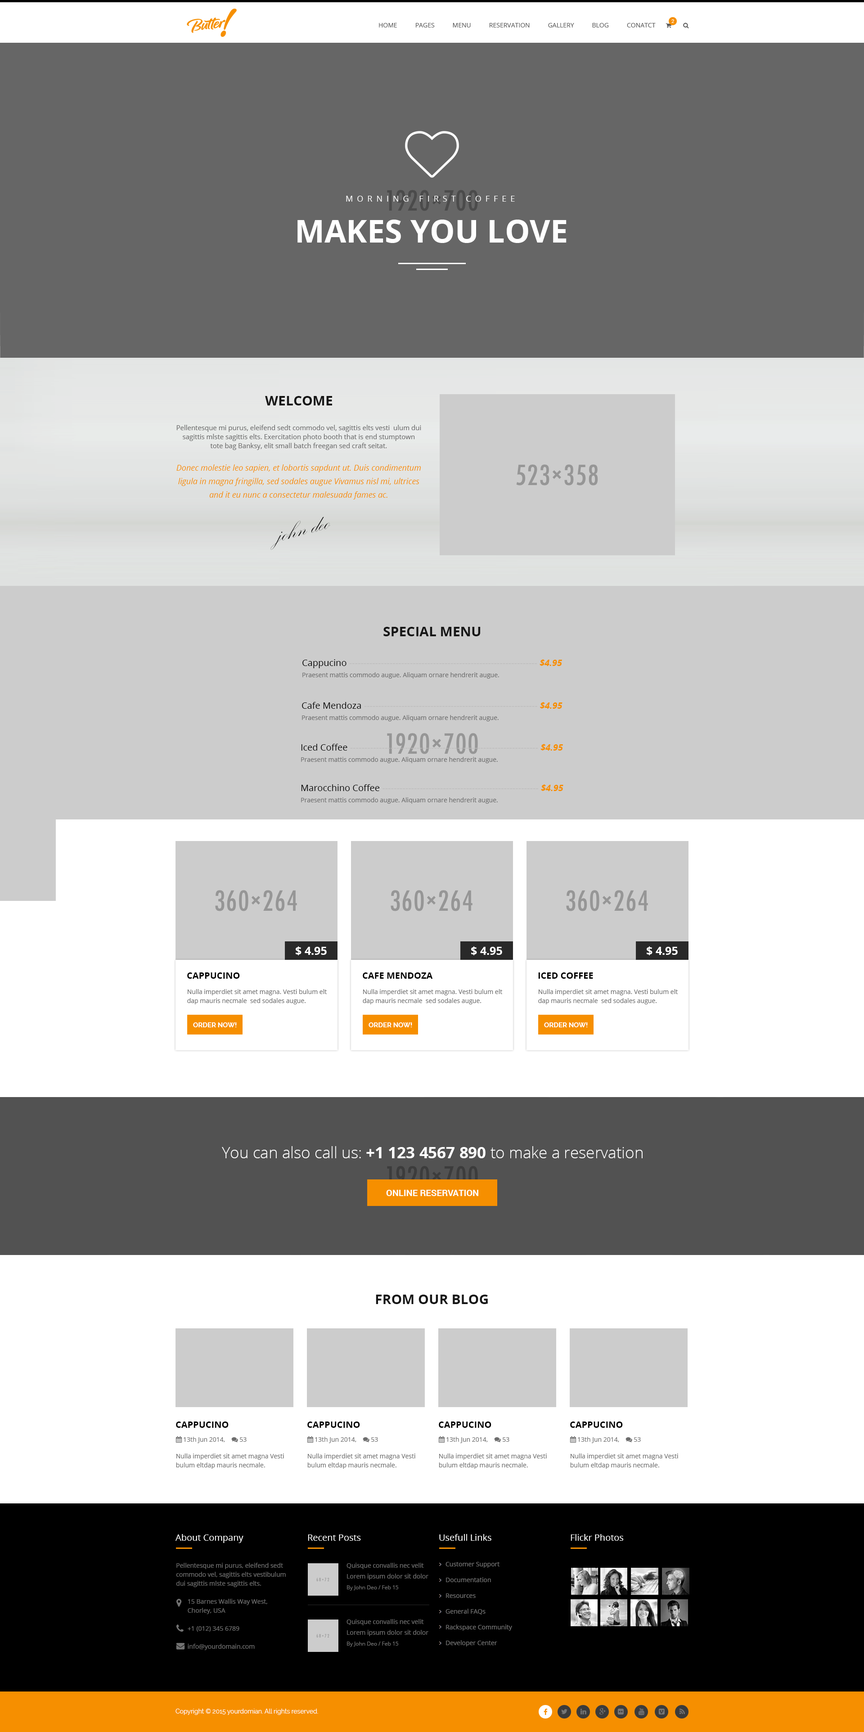
<style>
.page{position:relative;width:864px;height:1732px;background:#ffffff}
.page>*{position:absolute;margin:0}
.t1{font:5px "Lato-Regular";color:#ffffff;text-transform:uppercase}
.t2{font:8.1px "OpenSans";letter-spacing:0.5em;color:#ffffff;text-transform:uppercase}
.t3{font:31.5px "OpenSans-Bold";color:#ffffff;text-transform:uppercase}
.t4{font:13.5px "OpenSans-Bold";color:#161616;text-transform:uppercase}
.t5{font:6.7px/9px "OpenSans";color:#6d6d6d}
.t6{font:8.1px/13.5px "OpenSans-Italic";color:#f68f00}
.t7{font:27px "KunstlerScript";color:#000000}
.t8{font:9px/11.2px "OpenSans";color:#bdbcbc}
.t9{font:9px/11.2px "OpenSans";color:#010101}
.t10{font:9px/11.2px "OpenSans-BoldItalic";color:#f68f00}
.t11{font:6.3px/11.2px "OpenSans";color:#6d6d6d}
.t12{font:11.2px "OpenSans-Bold";color:#ffffff;text-transform:uppercase}
.t13{font:9px "OpenSans-Bold";color:#000000;text-transform:uppercase}
.t14{font:6.3px/9px "OpenSans";color:#6d6d6d}
.t15{font:6.8px "Raleway-Bold";color:#ffffff;text-transform:uppercase}
.t16{font:15.8px "OpenSans-Light";color:#ffffff}
.t17{font:15.8px "OpenSans-Bold";color:#ffffff}
.t18{font:9px "Roboto-Bold";color:#ffffff;text-transform:uppercase}
.t19{font:9px "OpenSans";color:#ffffff}
.t20{font:6.3px/10.8px "OpenSans";color:#6d6d6d}
.t21{font:5.4px/10.8px "OpenSans";color:#6d6d6d}
.t22{font:6.3px/15.8px "OpenSans";color:#727272}
.t23{font:6.3px "Raleway-Regular";color:#ffffff}
</style>
<div class="page">
<p class="t1" style="left:671px;top:19px;width:3px;height:4px">2</p>
<p class="t2" style="left:346px;top:196px;width:169px;height:6px">Morning First Coffee</p>
<p class="t3" style="left:297px;top:220px;width:270px;height:23px">Makes You Love</p>
<p class="t4" style="left:265px;top:396px;width:67px;height:9px">Welcome</p>
<p class="t5" style="left:176px;top:425px;width:245px;height:75px;text-align:center">Pellentesque mi purus, eleifend sedt commodo vel, sagittis elts vesti  ulum dui sagittis mlste sagittis elts. Exercitation photo booth that is end stumptown tote bag Banksy, elit small batch freegan sed craft seitat.<br><br><span class="t6">Donec molestie leo sapien, et lobortis sapdunt ut. Duis condimentum ligula in magna fringilla, sed sodales augue Vivamus nisl mi, ultrices and it eu nunc a consectetur malesuada fames ac.</span></p>
<p class="t7" style="left:270px;top:517px;width:60px;height:33px;rotate:-15deg">john deo</p>
<p class="t4" style="left:383px;top:627px;width:98px;height:9px">Special Menu</p>
<p class="t8" style="left:302px;top:659px;width:260px;height:20px"><span class="t9">Cappucino </span>----------------------------------------------------------------- <span class="t10">$4.95<br></span><span class="t11">Praesent mattis commodo augue. Aliquam ornare hendrerit augue.</span></p>
<p class="t11" style="left:302px;top:702px;width:260px;height:19px"><span class="t9">Cafe Mendoza </span><span class="t8">------------------------------------------------------------ </span><span class="t10">$4.95<br></span>Praesent mattis commodo augue. Aliquam ornare hendrerit augue.</p>
<p class="t8" style="left:301px;top:744px;width:262px;height:19px"><span class="t9">Iced Coffee </span>----------------------------------------------------------------- <span class="t10">$4.95<br></span><span class="t11">Praesent mattis commodo augue. Aliquam ornare hendrerit augue.</span></p>
<p class="t11" style="left:301px;top:784px;width:262px;height:20px"><span class="t9">Marocchino Coffee </span><span class="t8">------------------------------------------------------ </span><span class="t10">$4.95<br></span>Praesent mattis commodo augue. Aliquam ornare hendrerit augue.</p>
<p class="t12" style="left:296px;top:946px;width:31px;height:9px">$ 4.95</p>
<p class="t12" style="left:471px;top:946px;width:31px;height:9px">$ 4.95</p>
<p class="t12" style="left:647px;top:946px;width:31px;height:9px">$ 4.95</p>
<p class="t13" style="left:187px;top:972px;width:53px;height:7px">Cappucino</p>
<p class="t13" style="left:363px;top:972px;width:70px;height:7px">Cafe Mendoza</p>
<p class="t13" style="left:538px;top:972px;width:55px;height:7px">Iced Coffee</p>
<p class="t14" style="left:187px;top:989px;width:140px;height:15px">Nulla imperdiet sit amet magna. Vesti bulum elt dap mauris necmale  sed sodales augue.</p>
<p class="t14" style="left:363px;top:989px;width:139px;height:15px">Nulla imperdiet sit amet magna. Vesti bulum elt dap mauris necmale  sed sodales augue.</p>
<p class="t14" style="left:538px;top:989px;width:140px;height:15px">Nulla imperdiet sit amet magna. Vesti bulum elt dap mauris necmale  sed sodales augue.</p>
<p class="t15" style="left:193px;top:1022px;width:44px;height:5px">Order now!</p>
<p class="t15" style="left:369px;top:1022px;width:43px;height:5px">Order now!</p>
<p class="t15" style="left:544px;top:1022px;width:44px;height:5px">Order now!</p>
<p class="t16" style="left:222px;top:1146px;width:421px;height:12px">You can also call us: <span class="t17">+1 123 4567 890</span> to make a reservation</p>
<p class="t18" style="left:386px;top:1190px;width:92px;height:6px">Online Reservation</p>
<p class="t4" style="left:376px;top:1295px;width:112px;height:9px">from our blog</p>
<p class="t13" style="left:176px;top:1422px;width:53px;height:6px">Cappucino</p>
<p class="t13" style="left:307px;top:1422px;width:53px;height:6px">Cappucino</p>
<p class="t13" style="left:439px;top:1422px;width:52px;height:6px">Cappucino</p>
<p class="t13" style="left:570px;top:1422px;width:53px;height:6px">Cappucino</p>
<p class="t14" style="left:176px;top:1454px;width:108px;height:15px">Nulla imperdiet sit amet magna Vesti bulum eltdap mauris necmale.</p>
<p class="t14" style="left:307px;top:1454px;width:108px;height:15px">Nulla imperdiet sit amet magna Vesti bulum eltdap mauris necmale.</p>
<p class="t14" style="left:439px;top:1454px;width:108px;height:15px">Nulla imperdiet sit amet magna Vesti bulum eltdap mauris necmale.</p>
<p class="t14" style="left:570px;top:1454px;width:108px;height:15px">Nulla imperdiet sit amet magna Vesti bulum eltdap mauris necmale.</p>
<p class="t19" style="left:176px;top:1534px;width:67px;height:9px">About Company</p>
<p class="t19" style="left:308px;top:1534px;width:53px;height:7px">Recent Posts</p>
<p class="t19" style="left:439px;top:1534px;width:52px;height:7px">Usefull Links</p>
<p class="t19" style="left:571px;top:1534px;width:52px;height:7px">Flickr Photos</p>
<p class="t14" style="left:176px;top:1563px;width:110px;height:87px">Pellentesque mi purus, eleifend sedt commodo vel, sagittis elts vestibulum dui sagittis mlste sagittis elts.<br><br>       15 Barnes Wallis Way West,<br>       Chorley, USA<br><br>       +1 (012) 345 6789<br><br>       info@yourdomain.com</p>
<p class="t20" style="left:346px;top:1563px;width:82px;height:28px">Quisque convallis nec velit<br>Lorem ipsum dolor sit dolor<br><span class="t21">By John Deo / Feb 15</span></p>
<p class="t22" style="left:446px;top:1562px;width:66px;height:85px">Customer Support<br>Documentation<br>Resources<br>General FAQs<br>Rackspace Community<br>Developer Center</p>
<p class="t20" style="left:346px;top:1619px;width:82px;height:28px">Quisque convallis nec velit<br>Lorem ipsum dolor sit dolor<br><span class="t21">By John Deo / Feb 15</span></p>
<p class="t23" style="left:176px;top:1709px;width:142px;height:6px">Copyright © 2015 yourdomian. All rights reserved.</p>
</div>
